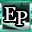
<style>
.page{position:relative;width:32px;height:32px}
.page>*{position:absolute;margin:0}
.t1{font:20px "Vani";letter-spacing:0.05em;color:#fefefe}
</style>
<div class="page">
<p class="t1" style="left:4px;top:7px;width:13px;height:14px">E</p>
<p class="t1" style="left:16px;top:11px;width:12px;height:14px">P</p>
</div>
